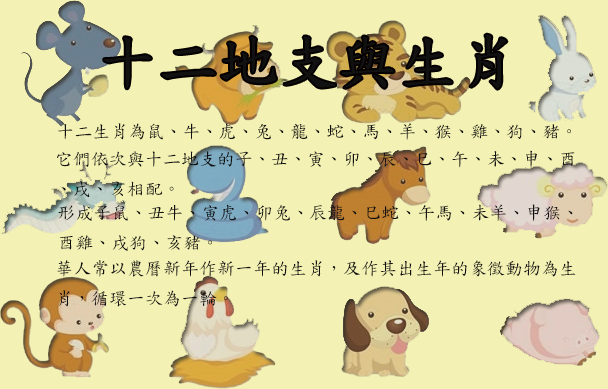
<style>
.page{position:relative;width:608px;height:389px;background:#f3f1b3}
.page>*{position:absolute;margin:0}
.t1{font:60px "DFKaiShu-SB-Estd-BF";color:#121112}
.t2{font:18px "DFKaiShu-SB-Estd-BF";color:#121112}
.t3{font:18px/30px "DFKaiShu-SB-Estd-BF";color:#121112}
</style>
<div class="page">
<p class="t1" style="left:104px;top:34px;width:403px;height:55px">十二地支與生肖</p>
<p class="t2" style="left:58px;top:123px;width:513px;height:17px">十二生肖為鼠、牛、虎、兔、龍、蛇、馬、羊、猴、雞、狗、豬。</p>
<p class="t3" style="left:57px;top:150px;width:518px;height:47px">它們依次與十二地支的子、丑、寅、卯、辰、巳、午、未、申、酉<br>、戌、亥相配。</p>
<p class="t3" style="left:58px;top:204px;width:515px;height:47px">形成子鼠、丑牛、寅虎、卯兔、辰龍、巳蛇、午馬、未羊、申猴、<br>酉雞、戌狗、亥豬。</p>
<p class="t3" style="left:57px;top:260px;width:519px;height:47px">華人常以農曆新年作新一年的生肖，及作其出生年的象徵動物為生<br>肖，循環一次為一輪。</p>
</div>
